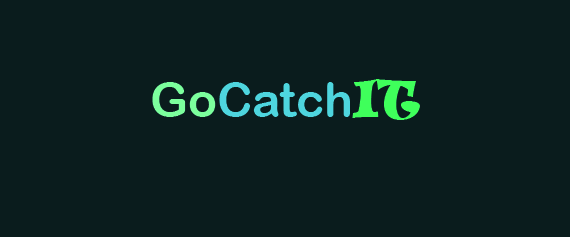
<style>
.page{position:relative;width:570px;height:237px;background:#0a1c1d}
.page>*{position:absolute;margin:0}
.t1{font:48px "ArialRoundedMTBold";color:#4ed5de}
.t2{font:48px "ArialRoundedMTBold";color:#7cff9d}
.t3{font:48px "Ravie";color:#3fff5b}
</style>
<div class="page">
<p class="t1" style="left:152px;top:79px;width:268px;height:41px"><span class="t2">Go</span>Catch<span class="t3">IT</span></p>
</div>
